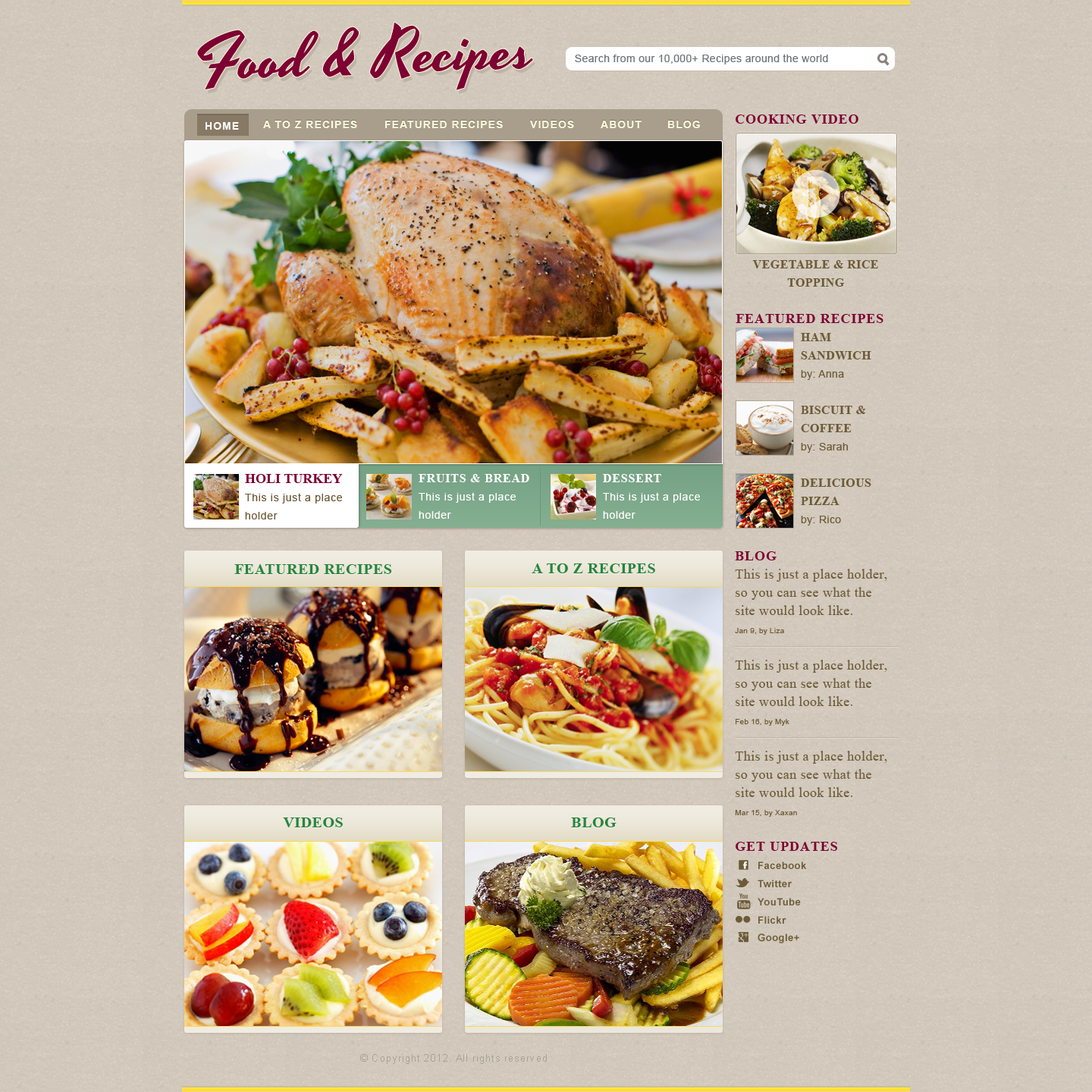
<style>
.page{position:relative;width:1092px;height:1092px}
.page>*{position:absolute;margin:0}
.t1{font:62.3px "Yesteryear-Regular";color:#7d0133}
.t2{font:10.6px "ArialMT";letter-spacing:0.025em;color:#707476}
.t3{font:10.6px "Arial-BoldMT";letter-spacing:0.075em;color:#ffffff;text-transform:uppercase}
.t4{font:10.6px "Arial-BoldMT";letter-spacing:0.075em;color:#fffcdf;text-transform:uppercase}
.t5{font:13.6px "TimesNewRomanPS-BoldMT";letter-spacing:0.05em;color:#7d0133;text-transform:uppercase}
.t6{font:12.1px/18.2px "TimesNewRomanPS-BoldMT";letter-spacing:0.025em;color:#6c5b37;text-transform:uppercase}
.t7{font:10.6px/18.2px "ArialMT";letter-spacing:0.025em;color:#6c5b37}
.t8{font:10.6px/18.2px "ArialMT";letter-spacing:0.05em;color:#6c5b37}
.t9{font:13.6px/18.2px "TimesNewRomanPS-BoldMT";color:#7d0133;text-transform:uppercase}
.t10{font:10.6px/18.2px "ArialMT";letter-spacing:0.05em;color:#ffffff}
.t11{font:12.1px/18.2px "TimesNewRomanPS-BoldMT";letter-spacing:0.05em;color:#ffffff;text-transform:uppercase}
.t12{font:15.2px "TimesNewRomanPS-BoldMT";letter-spacing:0.025em;color:#27843d;text-transform:uppercase}
.t13{font:13.6px/18.2px "TimesNewRomanPSMT";letter-spacing:0.025em;color:#6c5b37}
.t14{font:7.6px/18.2px "ArialMT";letter-spacing:0.025em;color:#6c5b37}
.t15{font:10.1px "Arial-BoldMT";letter-spacing:0.025em;color:#6c5b37}
.t16{font:9.9px "ArialMT";letter-spacing:0.075em;color:#aaa292}
</style>
<div class="page">
<p class="t1" style="left:197px;top:22px;width:336px;height:68px">Food &amp; Recipes</p>
<p class="t2" style="left:575px;top:54px;width:253px;height:10px">Search from our 10,000+ Recipes around the world</p>
<p class="t3" style="left:206px;top:122px;width:33px;height:8px">home</p>
<p class="t3" style="left:206px;top:122px;width:33px;height:8px">home</p>
<p class="t4" style="left:263px;top:121px;width:94px;height:7px">a to z recipes</p>
<p class="t4" style="left:385px;top:121px;width:118px;height:7px">featured recipes</p>
<p class="t4" style="left:530px;top:121px;width:44px;height:7px">Videos</p>
<p class="t4" style="left:601px;top:121px;width:41px;height:7px">about</p>
<p class="t4" style="left:668px;top:121px;width:32px;height:7px">blog</p>
<p class="t5" style="left:736px;top:115px;width:122px;height:9px">Cooking video</p>
<p class="t6" style="left:752px;top:260px;width:126px;height:27px;text-align:center">vegetable &amp; rice<br>topping</p>
<p class="t5" style="left:736px;top:314px;width:147px;height:9px">Featured Recipes</p>
<p class="t6" style="left:801px;top:333px;width:70px;height:47px">ham<br>Sandwich<br><span class="t7">by: Anna</span></p>
<p class="t6" style="left:801px;top:406px;width:65px;height:47px">Biscuit &amp; coffee<br><span class="t7">by: Sarah</span></p>
<p class="t8" style="left:245px;top:474px;width:98px;height:45px"><span class="t9">holi turkey<br></span>This is just a place holder</p>
<p class="t10" style="left:419px;top:474px;width:110px;height:45px"><span class="t11">fruits &amp; BRead <br></span>This is just a place holder</p>
<p class="t10" style="left:603px;top:474px;width:97px;height:45px"><span class="t11">dessert<br></span>This is just a place holder</p>
<p class="t6" style="left:801px;top:479px;width:70px;height:47px">Delicious pizza<br><span class="t7">by: Rico</span></p>
<p class="t5" style="left:735px;top:551px;width:42px;height:9px">blog</p>
<p class="t12" style="left:234px;top:564px;width:158px;height:10px">featured recipes</p>
<p class="t12" style="left:532px;top:563px;width:123px;height:10px">a to z Recipes</p>
<p class="t13" style="left:735px;top:569px;width:152px;height:248px">This is just a place holder, so you can see what the site would look like.<br><span class="t14">Jan 9, by Liza<br><br></span>This is just a place holder, so you can see what the site would look like.<br><span class="t14">Feb 16, by Myk<br><br></span>This is just a place holder, so you can see what the site would look like.<br><span class="t14">Mar 15, by Xaxan</span></p>
<p class="t12" style="left:283px;top:817px;width:60px;height:10px">videos</p>
<p class="t12" style="left:571px;top:817px;width:46px;height:10px">blog</p>
<p class="t5" style="left:736px;top:842px;width:101px;height:9px">get updates</p>
<p class="t15" style="left:758px;top:861px;width:48px;height:8px">Facebook</p>
<p class="t15" style="left:758px;top:880px;width:34px;height:7px">Twitter</p>
<p class="t15" style="left:758px;top:898px;width:43px;height:7px">YouTube</p>
<p class="t15" style="left:758px;top:916px;width:28px;height:8px">Flickr</p>
<p class="t15" style="left:758px;top:933px;width:41px;height:10px">Google+</p>
<p class="t16" style="left:360px;top:1054px;width:187px;height:10px">© Copyright 2012. All rights reserved</p>
</div>
